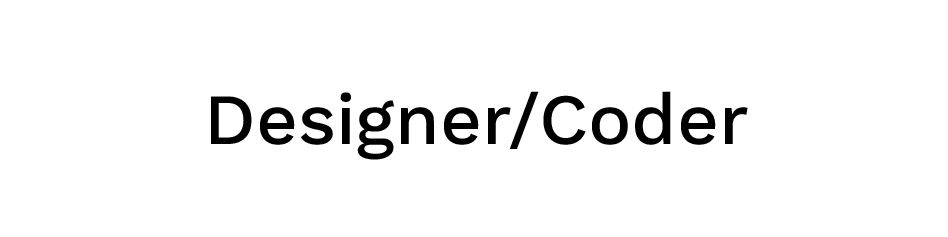
<style>
.page{position:relative;width:948px;height:237px;background:#ffffff}
.page>*{position:absolute;margin:0}
.t1{font:72px "WorkSans-Medium";color:#000000}
</style>
<div class="page">
<p class="t1" style="left:211px;top:91px;width:537px;height:69px">Designer/Coder</p>
</div>
